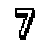
<style>
.page{position:relative;width:48px;height:48px;background:#ffffff}
.page>*{position:absolute;margin:0}
.t1{font:36px "KarmaFuture-Regular";color:#010101}
</style>
<div class="page">
<p class="t1" style="left:15px;top:8px;width:20px;height:32px">7</p>
</div>
